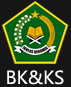
<style>
.page{position:relative;width:71px;height:87px;background:#161616}
.page>*{position:absolute;margin:0}
.t1{font:19px "MyanmarText";letter-spacing:0.005em;color:#ffffff}
</style>
<div class="page">
<p class="t1" style="left:7px;top:70px;width:57px;height:15px">BK&amp;KS</p>
</div>
